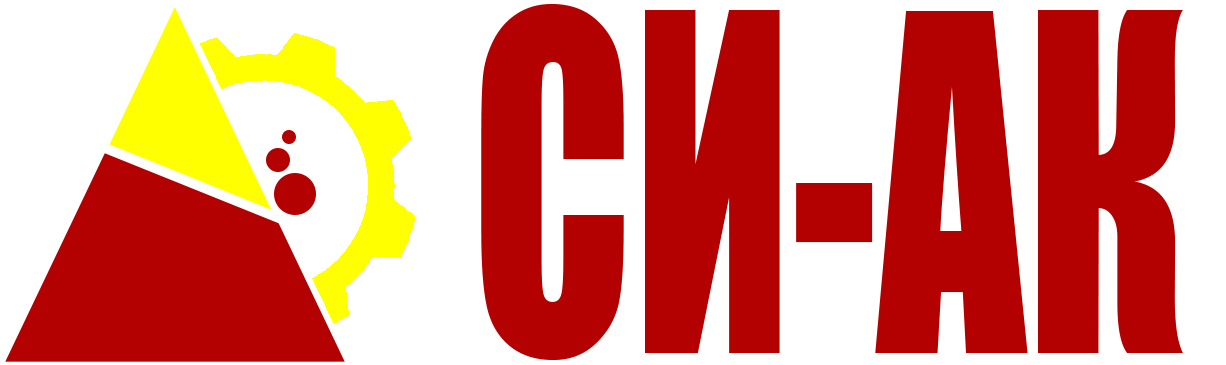
<style>
.page{position:relative;width:1226px;height:365px;background:#ffffff}
.page>*{position:absolute;margin:0}
.t1{font:432.6px "Impact";color:#b30000;scale:0.68 1}
</style>
<div class="page">
<p class="t1" style="left:481px;top:4px;width:702px;height:356px">СИ-АК</p>
</div>
